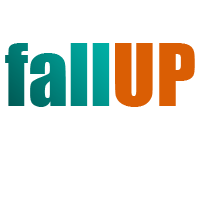
<style>
.page{position:relative;width:200px;height:200px;background:#ffffff}
.page>*{position:absolute;margin:0}
.t1{font:80px "Impact"}
.t2{font:80px "Impact";color:#da5e04}
</style>
<div class="page">
<p class="t1" style="left:5px;top:43px;width:105px;height:64px">fall</p>
<p class="t2" style="left:115px;top:43px;width:80px;height:64px">UP</p>
</div>
